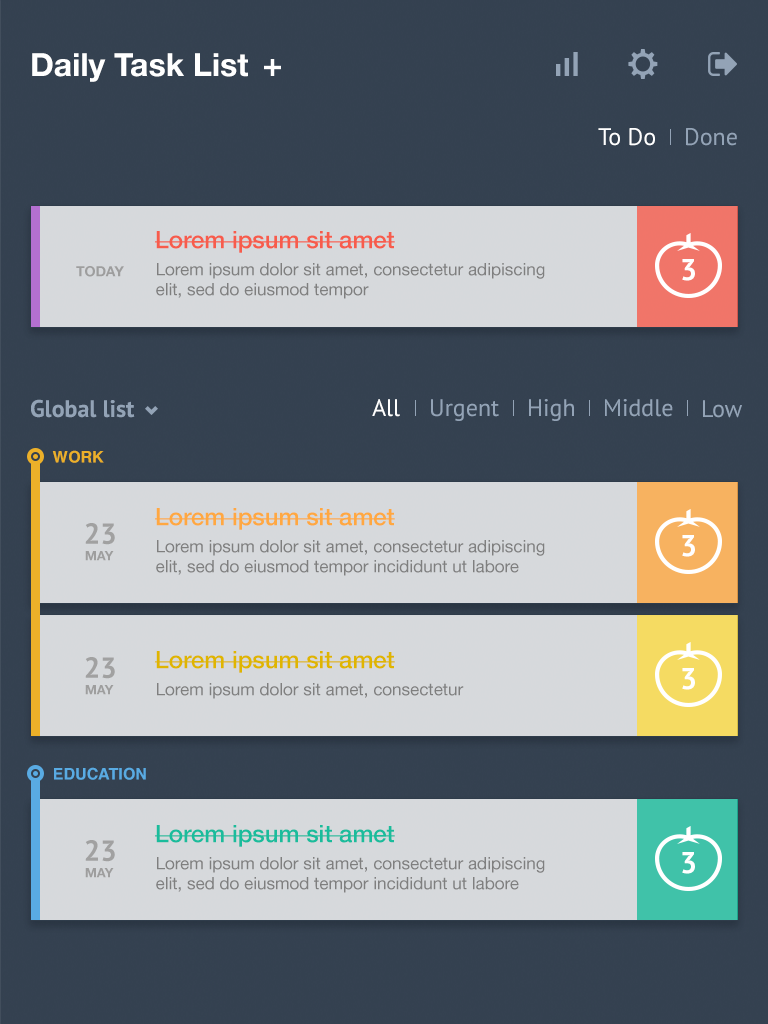
<style>
.page{position:relative;width:768px;height:1024px;background:#344150}
.page>*{position:absolute;margin:0}
.t1{font:32px "HelveticaNeue-Bold";color:#ffffff}
.t2{font:24px "PTSans-Regular";color:#ffffff}
.t3{font:24px "PTSans-Regular";color:#93a3b6}
.t4{font:24px "HelveticaNeue-Medium";color:#f75c4c}
.t5{font:14px "HelveticaNeue-Bold";color:#9e9e9e}
.t6{font:17px/20px "HelveticaNeue";color:#7f7f7f}
.t7{font:30px "PTSans-Bold";color:#ffffff}
.t8{font:24px "PTSans-Bold";color:#93a3b6}
.t9{font:16px "Helvetica-Bold";color:#ecb129}
.t10{font:24px "HelveticaNeue-Medium";color:#ffa841}
.t11{font:29px "PTSans-Bold";color:#a1a1a1}
.t12{font:13px "HelveticaNeue-Bold";color:#9e9e9e}
.t13{font:24px "HelveticaNeue-Medium";color:#dfb500}
.t14{font:17px "HelveticaNeue";color:#7f7f7f}
.t15{font:16px "Helvetica-Bold";color:#59abe3}
.t16{font:24px "HelveticaNeue-Medium";color:#1abc9c}
</style>
<div class="page">
<p class="t1" style="left:32px;top:53px;width:216px;height:29px">Daily Task List</p>
<p class="t2" style="left:598px;top:128px;width:57px;height:18px">To Do</p>
<p class="t3" style="left:686px;top:128px;width:51px;height:18px">Done</p>
<p class="t4" style="left:155px;top:231px;width:240px;height:22px">Lorem ipsum sit amet</p>
<p class="t5" style="left:76px;top:266px;width:48px;height:11px">TODAY</p>
<p class="t6" style="left:156px;top:263px;width:389px;height:36px">Lorem ipsum dolor sit amet, consectetur adipiscing elit, sed do eiusmod tempor</p>
<p class="t7" style="left:682px;top:259px;width:13px;height:22px">3</p>
<p class="t8" style="left:31px;top:399px;width:104px;height:19px">Global list</p>
<p class="t2" style="left:372px;top:399px;width:28px;height:18px">All</p>
<p class="t3" style="left:431px;top:399px;width:68px;height:22px">Urgent</p>
<p class="t3" style="left:529px;top:399px;width:45px;height:22px">High</p>
<p class="t3" style="left:605px;top:399px;width:68px;height:18px">Middle</p>
<p class="t3" style="left:703px;top:400px;width:39px;height:18px">Low</p>
<p class="t9" style="left:52px;top:450px;width:52px;height:13px">WORK</p>
<p class="t10" style="left:155px;top:508px;width:240px;height:22px">Lorem ipsum sit amet</p>
<p class="t11" style="left:85px;top:523px;width:30px;height:22px">23</p>
<p class="t6" style="left:156px;top:540px;width:389px;height:36px">Lorem ipsum dolor sit amet, consectetur adipiscing elit, sed do eiusmod tempor incididunt ut labore</p>
<p class="t7" style="left:682px;top:535px;width:13px;height:22px">3</p>
<p class="t12" style="left:85px;top:551px;width:29px;height:10px">MAY</p>
<p class="t13" style="left:155px;top:651px;width:240px;height:22px">Lorem ipsum sit amet</p>
<p class="t11" style="left:85px;top:657px;width:30px;height:22px">23</p>
<p class="t7" style="left:682px;top:668px;width:13px;height:22px">3</p>
<p class="t12" style="left:85px;top:685px;width:29px;height:10px">MAY</p>
<p class="t14" style="left:157px;top:683px;width:307px;height:16px">Lorem ipsum dolor sit amet, consectetur</p>
<p class="t15" style="left:54px;top:767px;width:92px;height:13px">EDUCATION</p>
<p class="t16" style="left:155px;top:825px;width:240px;height:22px">Lorem ipsum sit amet</p>
<p class="t11" style="left:85px;top:840px;width:30px;height:22px">23</p>
<p class="t6" style="left:156px;top:857px;width:389px;height:36px">Lorem ipsum dolor sit amet, consectetur adipiscing elit, sed do eiusmod tempor incididunt ut labore</p>
<p class="t7" style="left:682px;top:852px;width:13px;height:22px">3</p>
<p class="t12" style="left:85px;top:868px;width:29px;height:10px">MAY</p>
</div>
